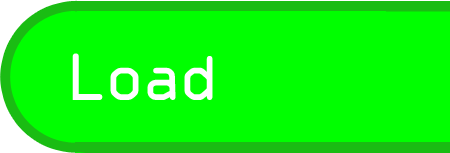
<style>
.page{position:relative;width:450px;height:153px;background:#00ff00}
.page>*{position:absolute;margin:0}
.t1{font:59.8px "OCRAStd";letter-spacing:-0.1em;color:#ffffff}
</style>
<div class="page">
<p class="t1" style="left:72px;top:53px;width:141px;height:47px">Load</p>
</div>
